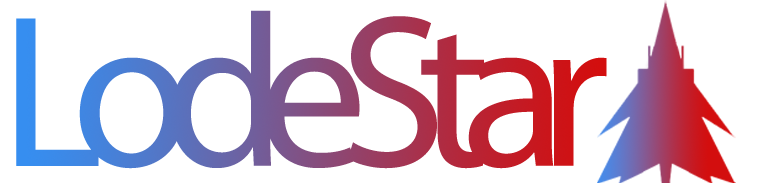
<style>
.page{position:relative;width:758px;height:188px;background:#ffffff}
.page>*{position:absolute;margin:0}
.t1{font:218.3px "MyriadPro-Regular";letter-spacing:-0.13em}
</style>
<div class="page">
<p class="t1" style="left:16px;top:10px;width:591px;height:159px">LodeStar</p>
</div>
